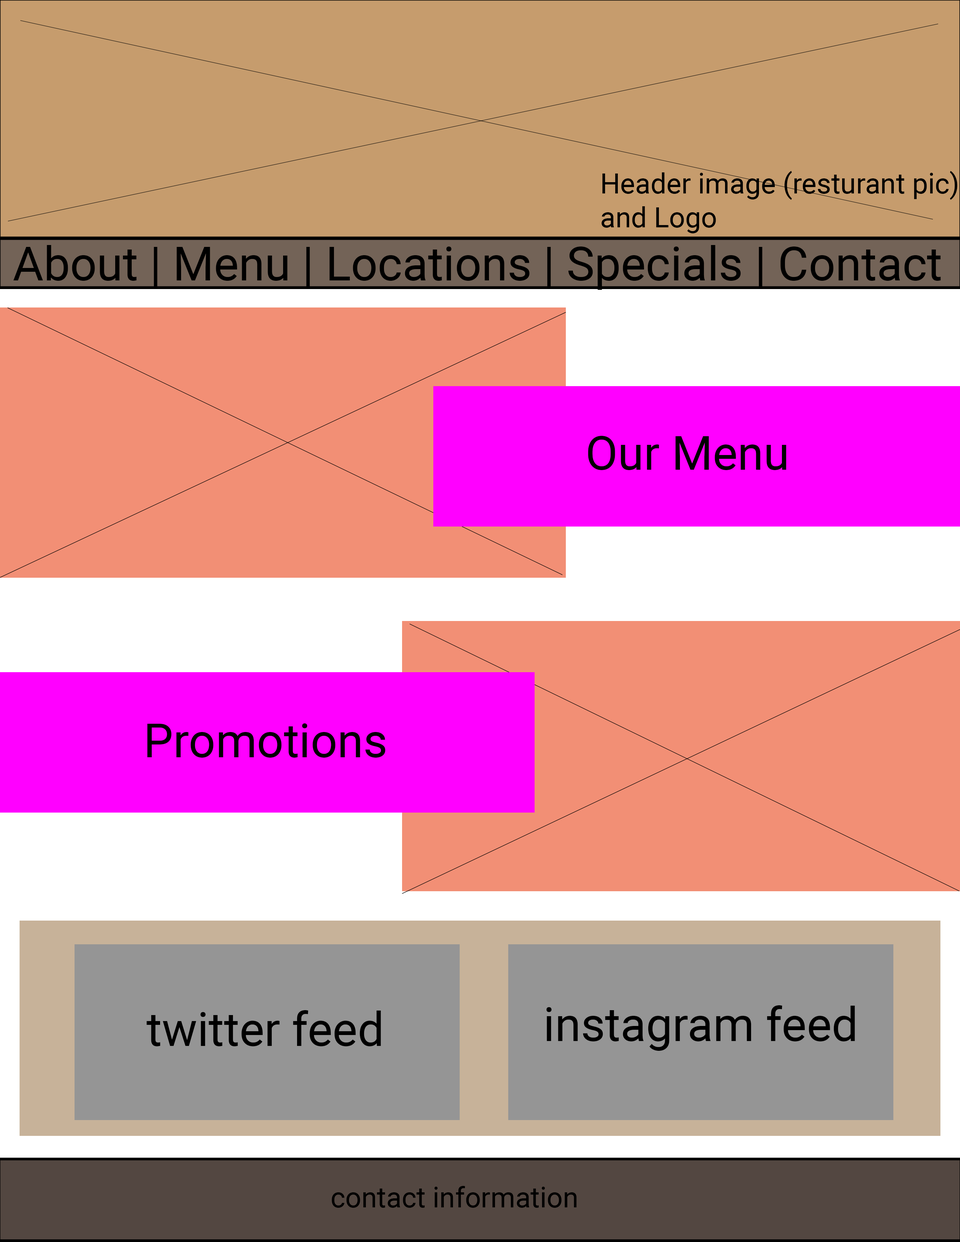
<style>
.page{position:relative;width:960px;height:1242px;background:#f28f75}
.page>*{position:absolute;margin:0}
.t1{font:28.2px "Roboto-Regular";color:#000000}
.t2{font:47.1px "Roboto-Regular";color:#000000}
</style>
<div class="page">
<p class="t1" style="left:602px;top:171px;width:355px;height:62px">Header image (resturant pic)<br>and Logo</p>
<p class="t2" style="left:13px;top:245px;width:928px;height:45px">About | Menu | Locations | Specials | Contact</p>
<p class="t2" style="left:588px;top:436px;width:198px;height:34px">Our Menu</p>
<p class="t2" style="left:147px;top:724px;width:238px;height:34px">Promotions</p>
<p class="t2" style="left:146px;top:1010px;width:235px;height:36px">twitter feed</p>
<p class="t2" style="left:546px;top:1005px;width:309px;height:46px">instagram feed</p>
<p class="t1" style="left:332px;top:1186px;width:245px;height:22px">contact information</p>
</div>
